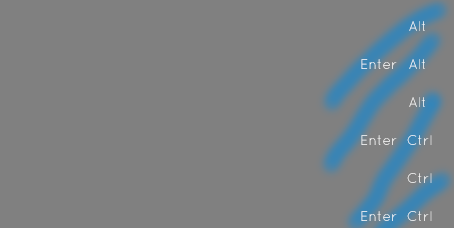
<style>
.page{position:relative;width:454px;height:228px;background:#808080}
.page>*{position:absolute;margin:0}
.t1{font:14px "Quicksand-Regular";color:#ffffff}
</style>
<div class="page">
<p class="t1" style="left:409px;top:21px;width:16px;height:10px">Alt</p>
<p class="t1" style="left:361px;top:59px;width:36px;height:10px">Enter</p>
<p class="t1" style="left:409px;top:59px;width:16px;height:10px">Alt</p>
<p class="t1" style="left:409px;top:97px;width:16px;height:10px">Alt</p>
<p class="t1" style="left:361px;top:135px;width:36px;height:10px">Enter</p>
<p class="t1" style="left:407px;top:135px;width:25px;height:10px">Ctrl</p>
<p class="t1" style="left:407px;top:173px;width:25px;height:10px">Ctrl</p>
<p class="t1" style="left:361px;top:211px;width:36px;height:10px">Enter</p>
<p class="t1" style="left:407px;top:211px;width:25px;height:10px">Ctrl</p>
</div>
